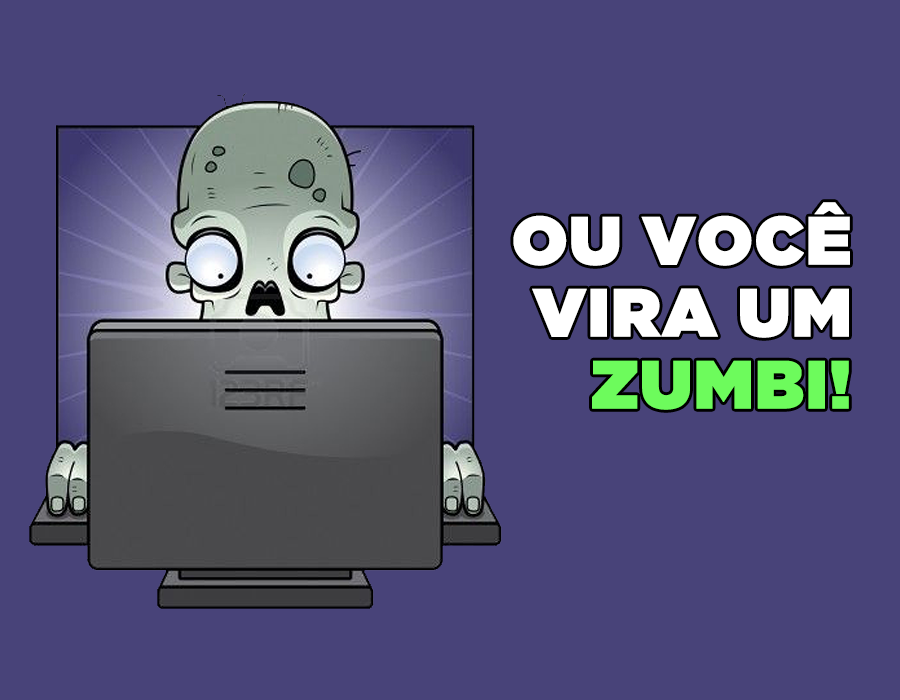
<style>
.page{position:relative;width:900px;height:700px;background:#484379}
.page>*{position:absolute;margin:0}
.t1{font:68px/72px "GothamUltra";color:#ffffff;font-weight:bold}
.t2{font:68px/72px "GothamUltra";color:#6dfb5c;font-weight:bold}
</style>
<div class="page">
<p class="t1" style="left:513px;top:202px;width:337px;height:208px;text-align:right">OU VOCÊ<br>VIRA UM<br><span class="t2">ZUMBI!</span></p>
</div>
